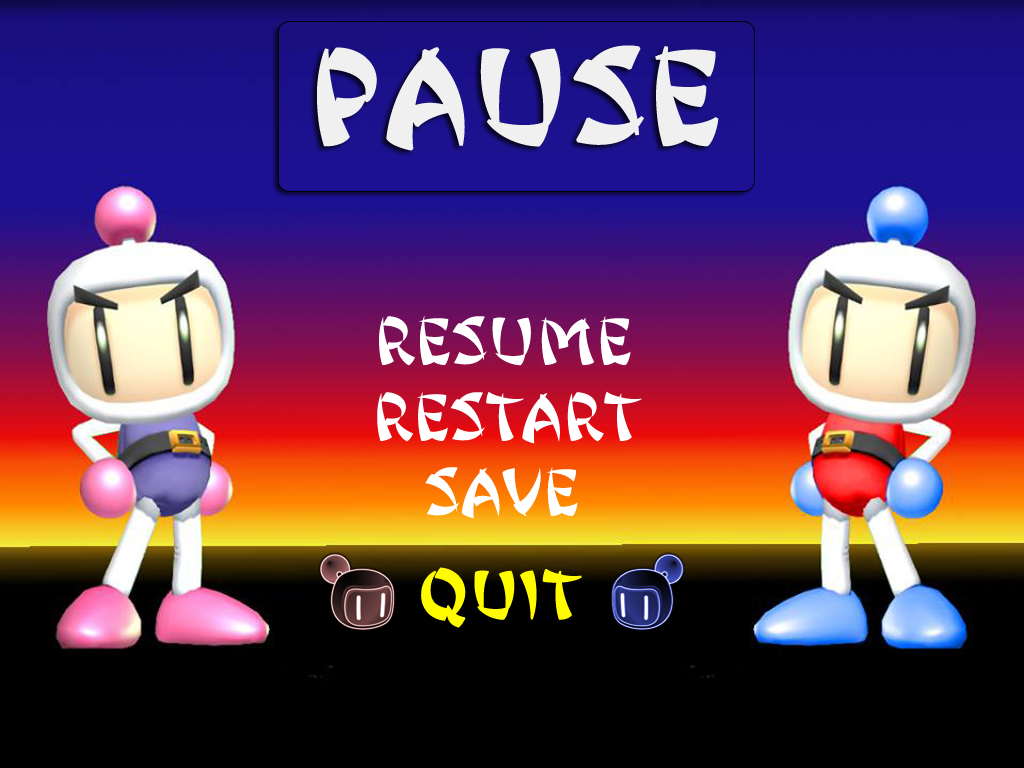
<style>
.page{position:relative;width:1024px;height:768px}
.page>*{position:absolute;margin:0}
.t1{font:120px "JingJing";color:#f0f0f0;font-weight:bold}
.t2{font:60px "JingJing";color:#ffffff}
.t3{font:60px "JingJing";color:#fffc00;font-weight:bold}
</style>
<div class="page">
<p class="t1" style="left:317px;top:45px;width:402px;height:106px">PAUSE</p>
<p class="t2" style="left:379px;top:316px;width:252px;height:50px;text-align:center">RESUME<br>u</p>
<p class="t2" style="left:377px;top:391px;width:265px;height:53px;text-align:center">restart<br>u</p>
<p class="t2" style="left:425px;top:467px;width:153px;height:52px;text-align:center">SAVE<br>u</p>
<p class="t3" style="left:421px;top:567px;width:161px;height:61px;text-align:center">QUIT<br><span class="t2">u</span></p>
</div>
